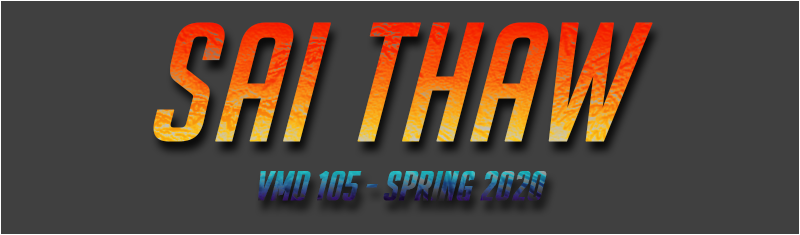
<style>
.page{position:relative;width:800px;height:235px;background:#404040}
.page>*{position:absolute;margin:0}
.t1{font:163.9px "BigNoodleTooOblique";letter-spacing:-0.005em;font-weight:bold}
.t2{font:39.6px "BigNoodleTooOblique";letter-spacing:-0.005em;font-weight:bold}
</style>
<div class="page">
<p class="t1" style="left:153px;top:22px;width:500px;height:120px">Sai Thaw</p>
<p class="t2" style="left:258px;top:171px;width:289px;height:30px">VMD 105 - Spring 2020</p>
</div>
